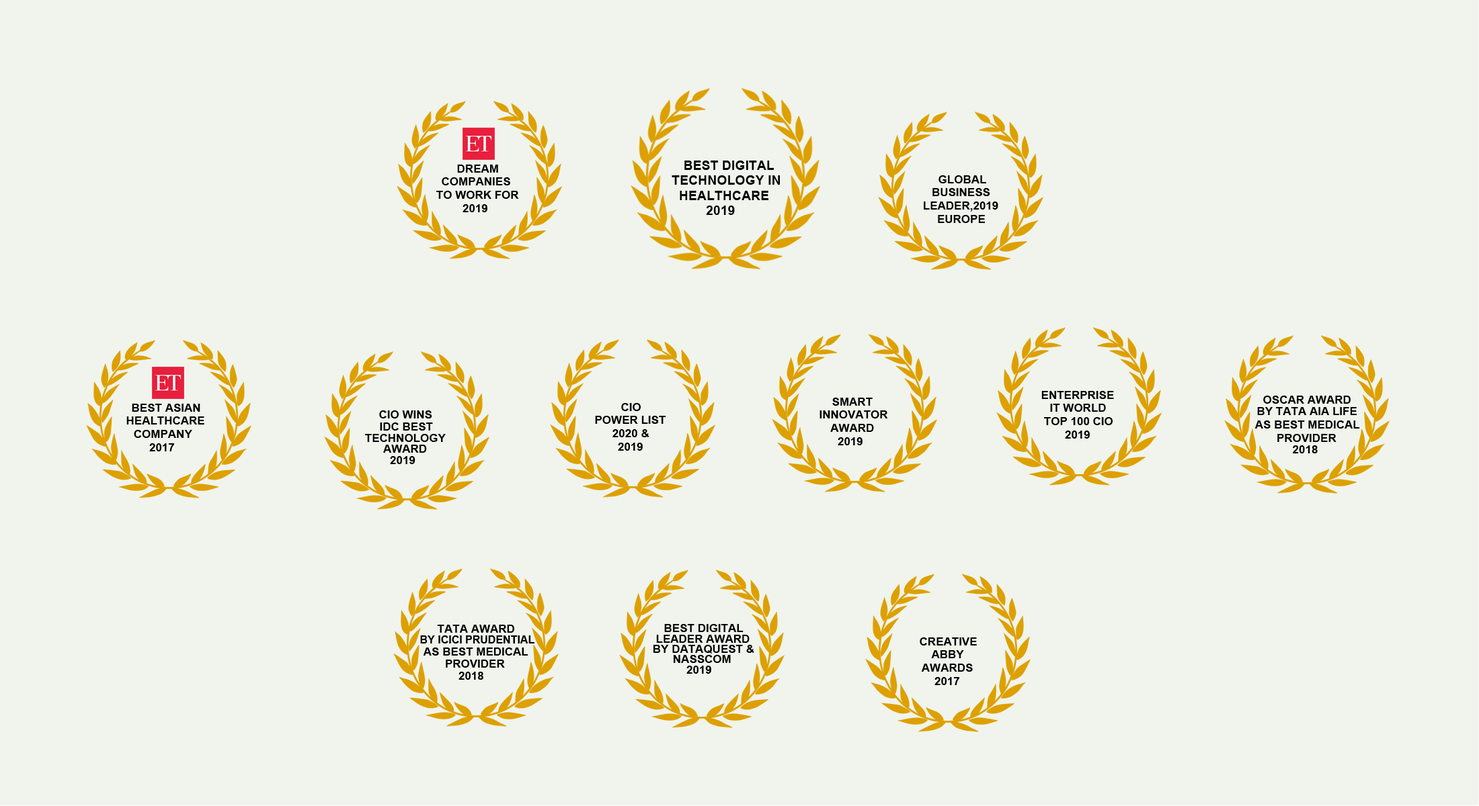
<style>
.page{position:relative;width:1479px;height:806px;background:#f0f4ec}
.page>*{position:absolute;margin:0}
.t1{font:13.1px "Arial-BoldMT";color:#000000}
.t2{font:11.4px "Arial-BoldMT";color:#000000}
.t3{font:10.8px "Arial-BoldMT";color:#000000}
</style>
<div class="page">
<p class="t1" style="left:684px;top:161px;width:90px;height:9px">BEST DIGITAL</p>
<p class="t2" style="left:457px;top:165px;width:41px;height:8px">DREAM</p>
<p class="t2" style="left:442px;top:177px;width:68px;height:8px">COMPANIES</p>
<p class="t1" style="left:671px;top:175px;width:109px;height:10px">TECHNOLOGY IN</p>
<p class="t2" style="left:938px;top:175px;width:48px;height:8px">GLOBAL</p>
<p class="t2" style="left:436px;top:191px;width:83px;height:8px">TO WORK FOR</p>
<p class="t1" style="left:679px;top:191px;width:89px;height:9px">HEALTHCARE</p>
<p class="t2" style="left:932px;top:188px;width:58px;height:8px">BUSINESS</p>
<p class="t2" style="left:462px;top:204px;width:25px;height:8px">2019</p>
<p class="t1" style="left:706px;top:206px;width:29px;height:9px">2019</p>
<p class="t2" style="left:923px;top:202px;width:75px;height:10px">LEADER,2019</p>
<p class="t2" style="left:938px;top:215px;width:47px;height:8px">EUROPE</p>
<p class="t2" style="left:832px;top:398px;width:40px;height:8px">SMART</p>
<p class="t2" style="left:1041px;top:391px;width:73px;height:8px">ENTERPRISE</p>
<p class="t2" style="left:1263px;top:396px;width:87px;height:8px">OSCAR AWARD</p>
<p class="t2" style="left:132px;top:404px;width:68px;height:8px">BEST ASIAN</p>
<p class="t2" style="left:379px;top:411px;width:53px;height:8px">CIO WINS</p>
<p class="t2" style="left:621px;top:403px;width:19px;height:8px">CIO</p>
<p class="t2" style="left:819px;top:411px;width:69px;height:8px">INNOVATOR</p>
<p class="t2" style="left:1050px;top:404px;width:56px;height:8px">IT WORLD</p>
<p class="t2" style="left:1257px;top:407px;width:99px;height:8px">BY TATA AIA LIFE</p>
<p class="t2" style="left:126px;top:417px;width:78px;height:8px">HEALTHCARE</p>
<p class="t2" style="left:380px;top:423px;width:53px;height:8px">IDC BEST</p>
<p class="t2" style="left:595px;top:416px;width:70px;height:8px">POWER LIST</p>
<p class="t2" style="left:830px;top:424px;width:44px;height:8px">AWARD</p>
<p class="t2" style="left:1044px;top:417px;width:68px;height:8px">TOP 100 CIO</p>
<p class="t2" style="left:1254px;top:421px;width:106px;height:8px">AS BEST MEDICAL</p>
<p class="t2" style="left:134px;top:430px;width:58px;height:8px">COMPANY</p>
<p class="t2" style="left:365px;top:434px;width:81px;height:8px">TECHNOLOGY</p>
<p class="t2" style="left:612px;top:429px;width:37px;height:9px">2020 &amp;</p>
<p class="t2" style="left:837px;top:438px;width:25px;height:8px">2019</p>
<p class="t2" style="left:1065px;top:431px;width:24px;height:8px">2019</p>
<p class="t2" style="left:1277px;top:434px;width:59px;height:8px">PROVIDER</p>
<p class="t2" style="left:149px;top:444px;width:25px;height:8px">2017</p>
<p class="t2" style="left:383px;top:445px;width:44px;height:8px">AWARD</p>
<p class="t2" style="left:618px;top:443px;width:24px;height:8px">2019</p>
<p class="t2" style="left:1292px;top:446px;width:25px;height:8px">2018</p>
<p class="t2" style="left:390px;top:456px;width:25px;height:8px">2019</p>
<p class="t2" style="left:437px;top:625px;width:77px;height:8px">TATA AWARD</p>
<p class="t2" style="left:664px;top:624px;width:79px;height:8px">BEST DIGITAL</p>
<p class="t3" style="left:420px;top:636px;width:114px;height:8px">BY ICICI PRUDENTIAL</p>
<p class="t2" style="left:656px;top:635px;width:93px;height:8px">LEADER AWARD</p>
<p class="t2" style="left:919px;top:638px;width:58px;height:8px">CREATIVE</p>
<p class="t2" style="left:423px;top:648px;width:105px;height:8px">AS BEST MEDICAL</p>
<p class="t2" style="left:653px;top:645px;width:101px;height:9px">BY DATAQUEST &amp;</p>
<p class="t2" style="left:931px;top:651px;width:33px;height:8px">ABBY</p>
<p class="t2" style="left:446px;top:660px;width:59px;height:8px">PROVIDER</p>
<p class="t2" style="left:673px;top:655px;width:58px;height:8px">NASSCOM</p>
<p class="t2" style="left:921px;top:664px;width:51px;height:8px">AWARDS</p>
<p class="t2" style="left:458px;top:672px;width:25px;height:8px">2018</p>
<p class="t2" style="left:686px;top:666px;width:25px;height:8px">2019</p>
<p class="t2" style="left:934px;top:677px;width:25px;height:9px">2017</p>
</div>
